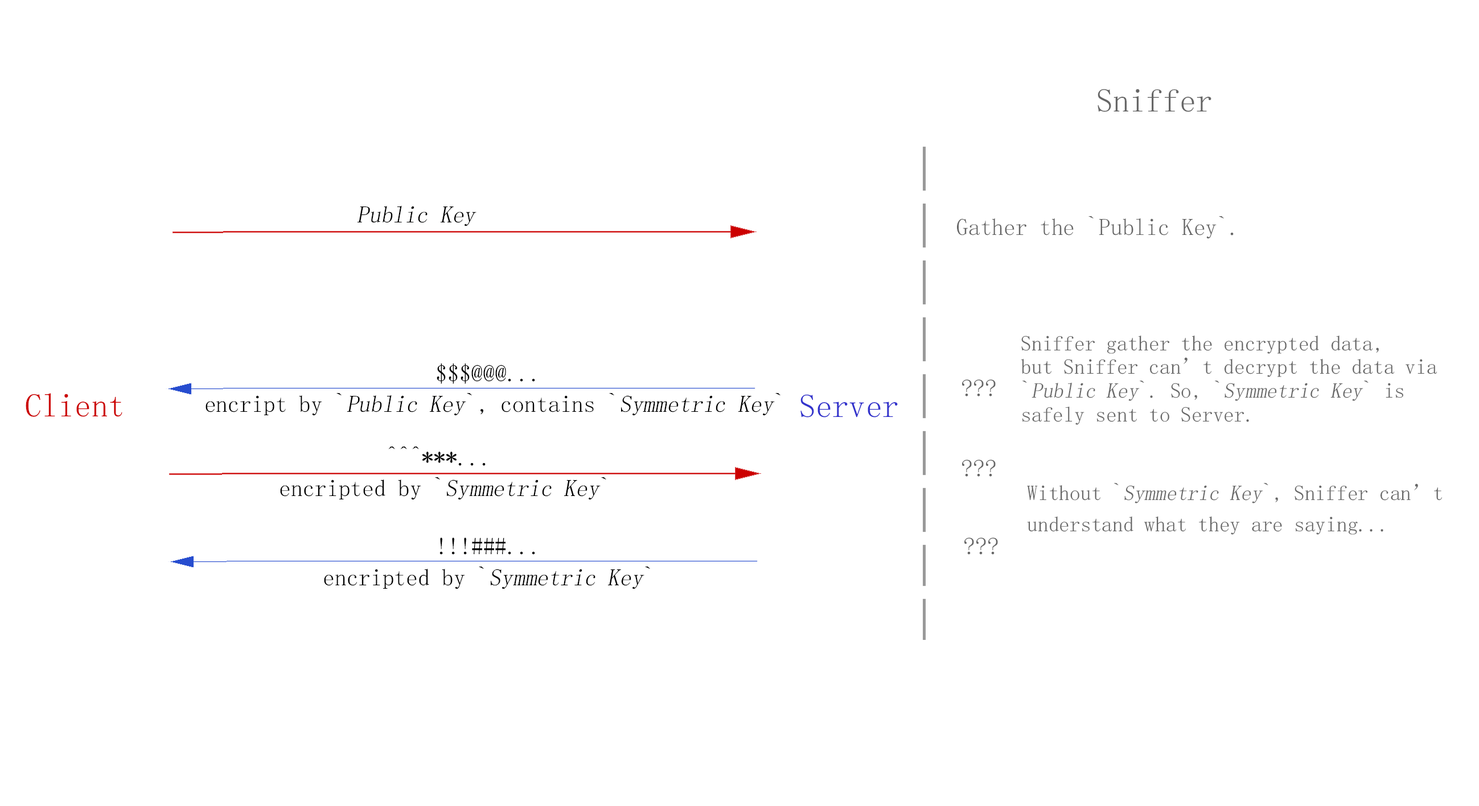
<style>
.page{position:relative;width:1479px;height:806px;background:#ffffff}
.page>*{position:absolute;margin:0}
.t1{font:33.2px "FangSong";color:#666666}
.t2{font:23.7px "FangSong";color:#000000;font-style:italic}
.t3{font:23.7px "FangSong";color:#666666}
.t4{font:21.3px/23.7px "FangSong";color:#666666}
.t5{font:21.3px/23.7px "FangSong";color:#666666;font-style:italic}
.t6{font:23.7px/30.8px "FangSong";color:#000000}
.t7{font:23.7px/30.8px "FangSong";color:#000000;font-style:italic}
.t8{font:33.2px "FangSong";color:#cc0000}
.t9{font:33.2px "FangSong";color:#3333cc}
.t10{font:21.3px/30.8px "FangSong";color:#666666}
.t11{font:21.3px/30.8px "FangSong";color:#666666;font-style:italic}
</style>
<div class="page">
<p class="t1" style="left:1097px;top:89px;width:114px;height:23px">Sniffer</p>
<p class="t2" style="left:357px;top:205px;width:119px;height:22px">Public Key</p>
<p class="t3" style="left:957px;top:216px;width:276px;height:23px">Gather the `Public Key`.</p>
<p class="t4" style="left:1020px;top:335px;width:416px;height:90px">Sniffer gather the encrypted data,<br>but Sniffer can’t decrypt the data via <br>`<span class="t5">Public Key</span>`. So, `<span class="t5">Symmetric Key</span>` is <br>safely sent to Server.</p>
<p class="t6" style="left:205px;top:364px;width:575px;height:52px;text-align:center">$$$@@@... <br>encript by `<span class="t7">Public Key</span>`, contains `<span class="t7">Symmetric Key</span>`</p>
<p class="t3" style="left:962px;top:380px;width:33px;height:17px">???</p>
<p class="t8" style="left:26px;top:393px;width:96px;height:24px">Client</p>
<p class="t9" style="left:800px;top:394px;width:98px;height:24px">Server</p>
<p class="t6" style="left:280px;top:447px;width:326px;height:53px;text-align:center">^^^***... <br>encripted by `<span class="t7">Symmetric Key</span>`</p>
<p class="t3" style="left:962px;top:460px;width:33px;height:17px">???</p>
<p class="t10" style="left:1027px;top:483px;width:415px;height:52px">Without `<span class="t11">Symmetric Key</span>`, Sniffer can’t<br>understand what they are saying...</p>
<p class="t6" style="left:324px;top:538px;width:326px;height:52px;text-align:center">!!!###...<br>encripted by `<span class="t7">Symmetric Key</span>`</p>
<p class="t3" style="left:964px;top:538px;width:34px;height:17px">???</p>
</div>
